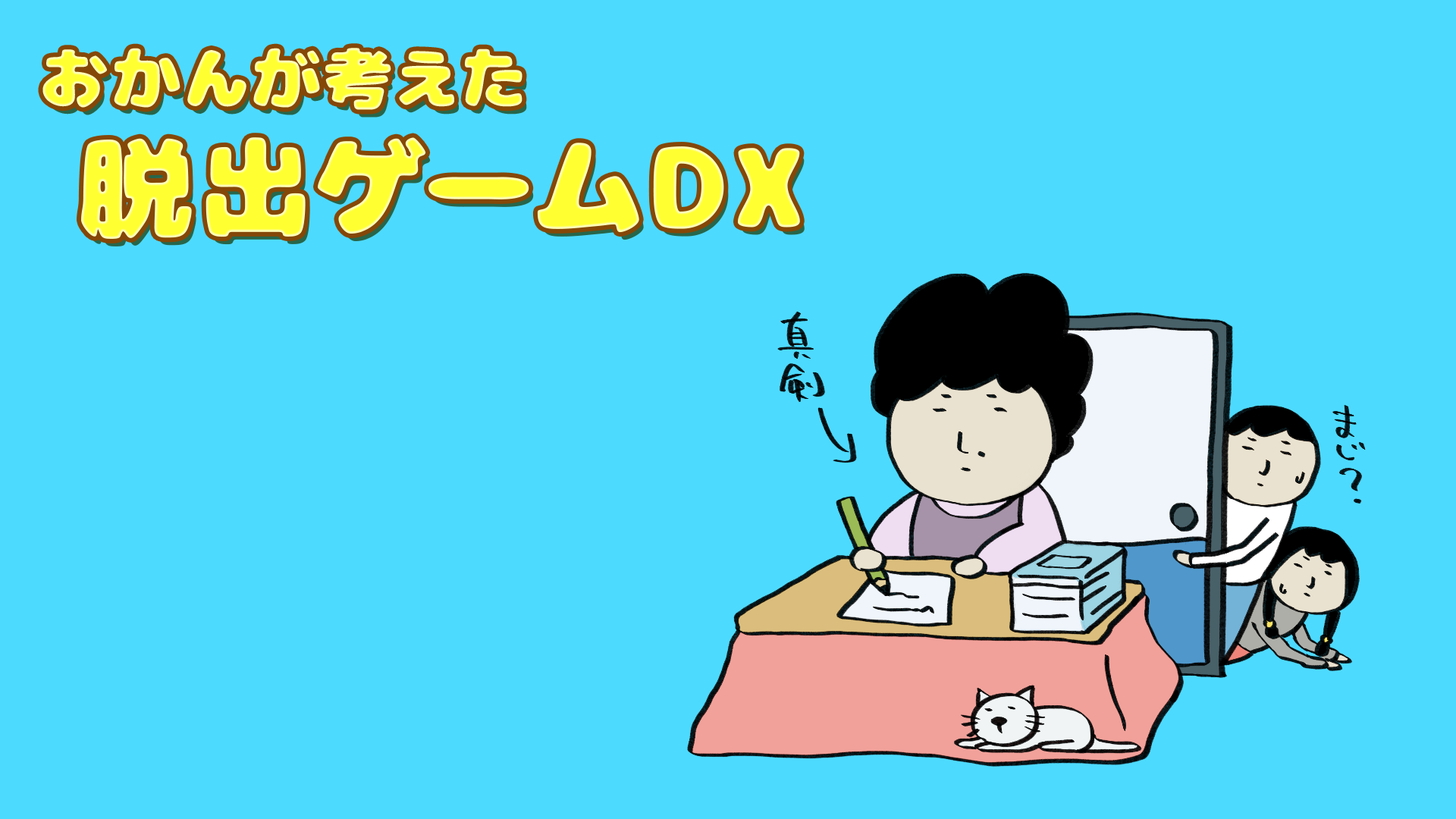
<style>
.page{position:relative;width:1456px;height:819px;background:#4ddaff}
.page>*{position:absolute;margin:0}
.t1{font:68.2px "07NikumaruFont";letter-spacing:0.08em}
.t2{font:113.7px "07NikumaruFont";letter-spacing:0.08em;color:#ffff31}
</style>
<div class="page">
<p class="t1" style="left:42px;top:48px;width:480px;height:62px">おかんが考えた</p>
<p class="t2" style="left:81px;top:137px;width:719px;height:102px">脱出ゲームDX</p>
</div>
